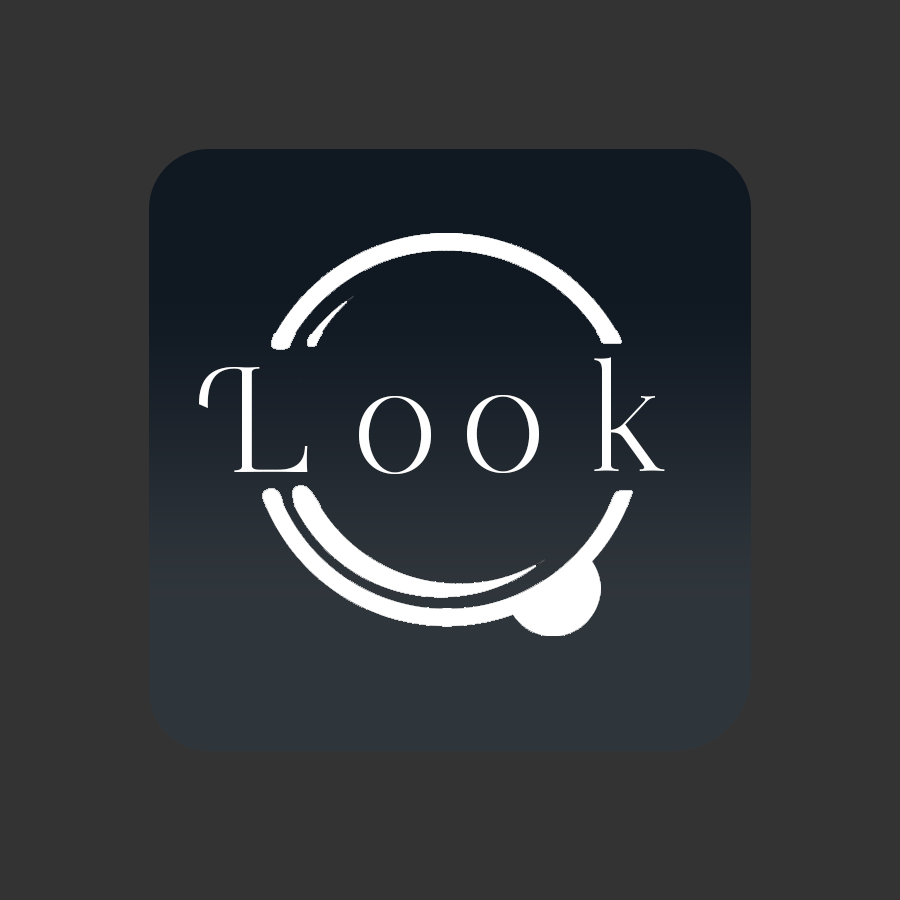
<style>
.page{position:relative;width:900px;height:900px;background:#333333}
.page>*{position:absolute;margin:0}
.t1{font:150px "Ethereal-Thin";color:#fefefe}
.t2{font:150px "Ethereal-Thin";color:#ffffff}
</style>
<div class="page">
<p class="t1" style="left:467px;top:357px;width:198px;height:116px">o k</p>
<p class="t2" style="left:199px;top:367px;width:232px;height:107px">L o</p>
</div>
